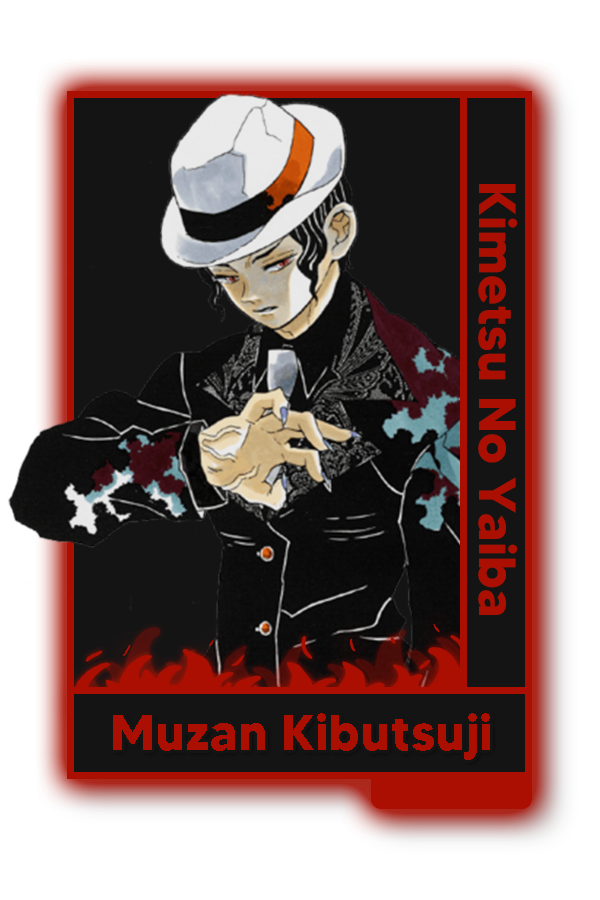
<style>
.page{position:relative;width:600px;height:900px;background:#141414}
.page>*{position:absolute;margin:0}
.t1{font:52px "MADETOMMY-Bold";color:#ab0f01}
.t2{font:50.5px "MADETOMMY-Bold";color:#ab0f01}
</style>
<div class="page">
<p class="t1" style="left:478px;top:184px;width:40px;height:431px;rotate:90deg">Kimetsu No Yaiba</p>
<p class="t2" style="left:113px;top:713px;width:377px;height:47px">Muzan Kibutsuji</p>
</div>
